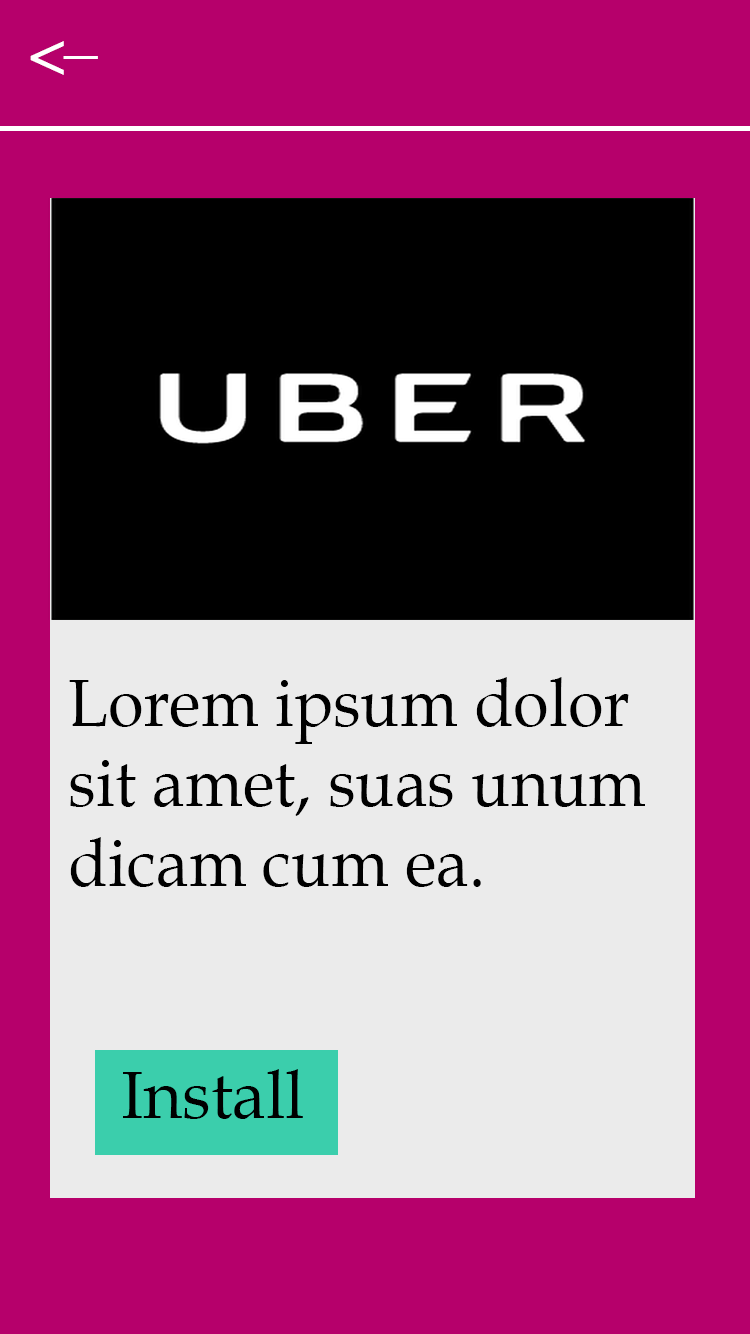
<style>
.page{position:relative;width:750px;height:1334px;background:#b6006b}
.page>*{position:absolute;margin:0}
.t1{font:66.7px "BookAntiqua";color:#ffffff}
.t2{font:66.7px "BookAntiqua";color:#000000}
</style>
<div class="page">
<p class="t1" style="left:30px;top:41px;width:34px;height:34px">&lt;</p>
<p class="t1" style="left:63px;top:56px;width:35px;height:3px">_</p>
<p class="t2" style="left:69px;top:677px;width:576px;height:210px">Lorem ipsum dolor <br>sit amet, suas unum <br>dicam cum ea.</p>
<p class="t2" style="left:123px;top:1069px;width:180px;height:50px">Install</p>
</div>
